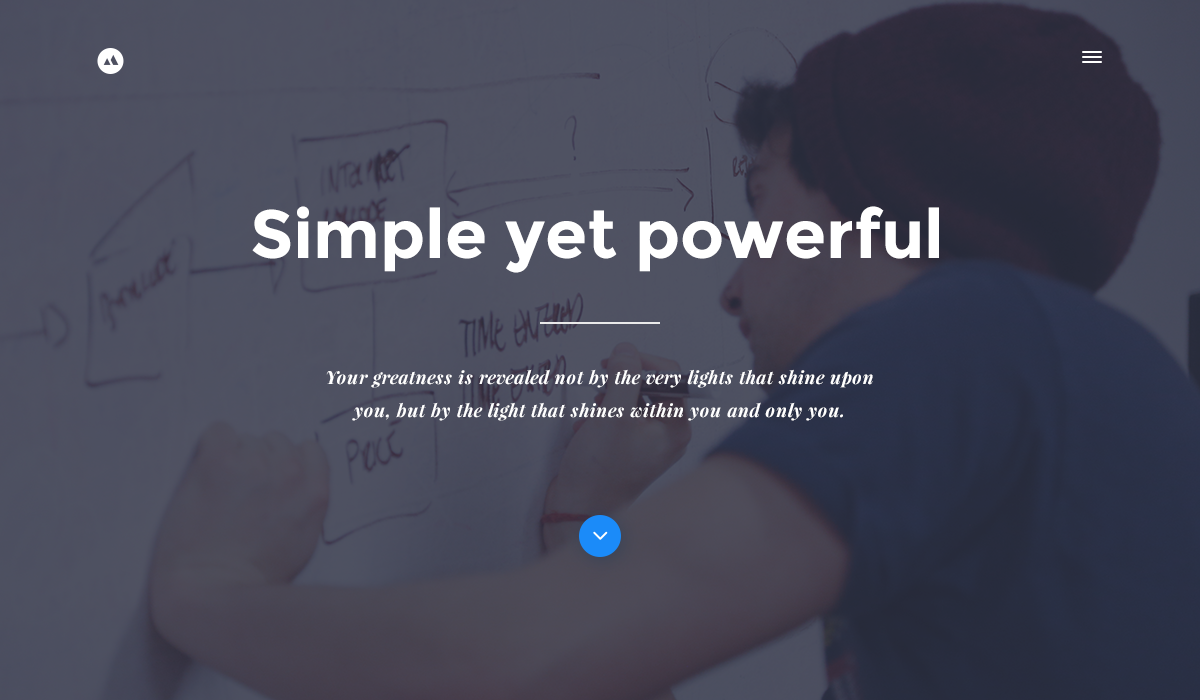
<style>
.page{position:relative;width:1200px;height:700px}
.page>*{position:absolute;margin:0}
.t1{font:68px "Montserrat-Bold";color:#ffffff}
.t2{font:18px/33px "PlayfairDisplay-BoldItalic";letter-spacing:0.03em;color:#ffffff}
</style>
<div class="page">
<p class="t1" style="left:252px;top:206px;width:687px;height:67px">Simple yet powerful</p>
<p class="t2" style="left:326px;top:369px;width:547px;height:52px;text-align:center">Your greatness is revealed not by the very lights that shine upon you, but by the light that shines within you and only you.</p>
</div>
